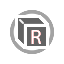
<style>
.page{position:relative;width:64px;height:64px;background:#ffffff}
.page>*{position:absolute;margin:0}
.t1{font:20.7px "MyriadPro-Regular";letter-spacing:0.1em;color:#ffffff}
</style>
<div class="page">
<p class="t1" style="left:31px;top:30px;width:10px;height:14px">R</p>
</div>
